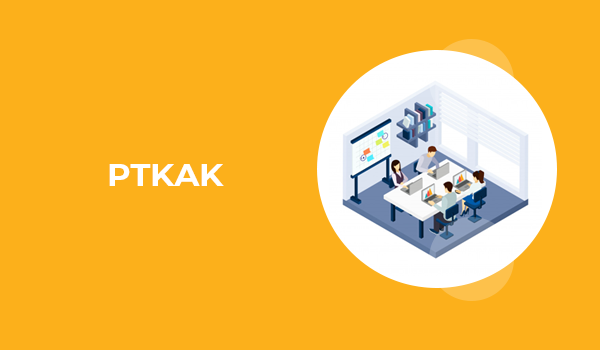
<style>
.page{position:relative;width:600px;height:350px;background:#fcb01b}
.page>*{position:absolute;margin:0}
.t1{font:30px "Montserrat-Bold";color:#ffffff;scale:1.1 1}
</style>
<div class="page">
<p class="t1" style="left:109px;top:164px;width:115px;height:22px">PTKAK</p>
</div>
